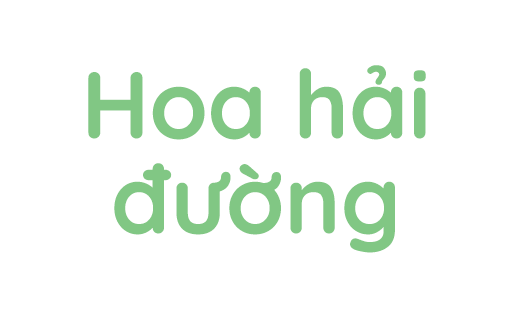
<style>
.page{position:relative;width:512px;height:320px;background:#ffffff}
.page>*{position:absolute;margin:0}
.t1{font:95px/95px "Quicksand-Bold";color:#81c784}
</style>
<div class="page">
<p class="t1" style="left:88px;top:65px;width:338px;height:188px;text-align:center">Hoa hải đường</p>
</div>
